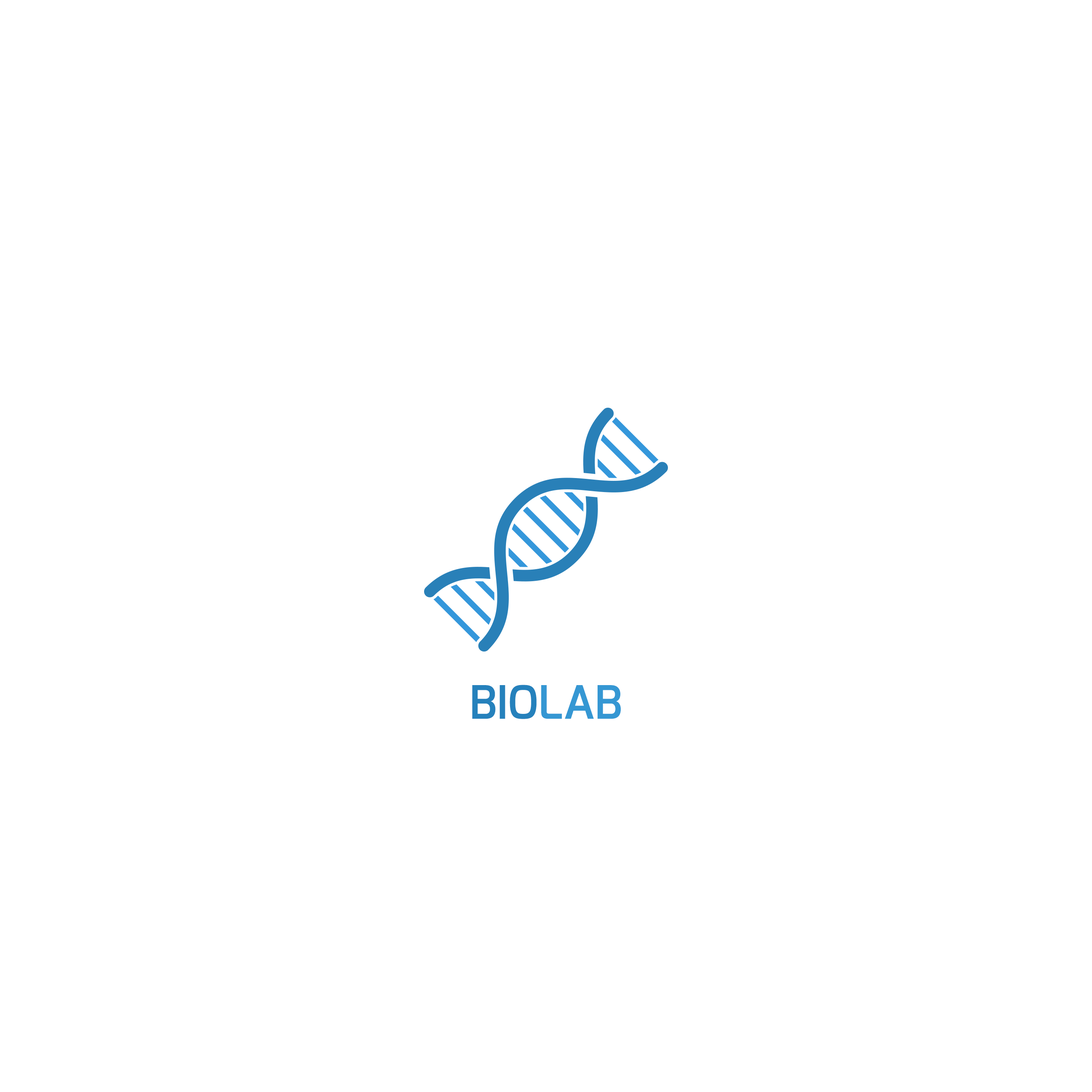
<style>
.page{position:relative;width:1092px;height:1092px;background:#ffffff}
.page>*{position:absolute;margin:0}
.t1{font:45.8px "Exo-DemiBold";color:#2581bc}
.t2{font:45.8px "Exo-DemiBold";color:#3597d3}
</style>
<div class="page">
<p class="t1" style="left:472px;top:685px;width:149px;height:34px">BIO<span class="t2">LAB</span></p>
</div>
